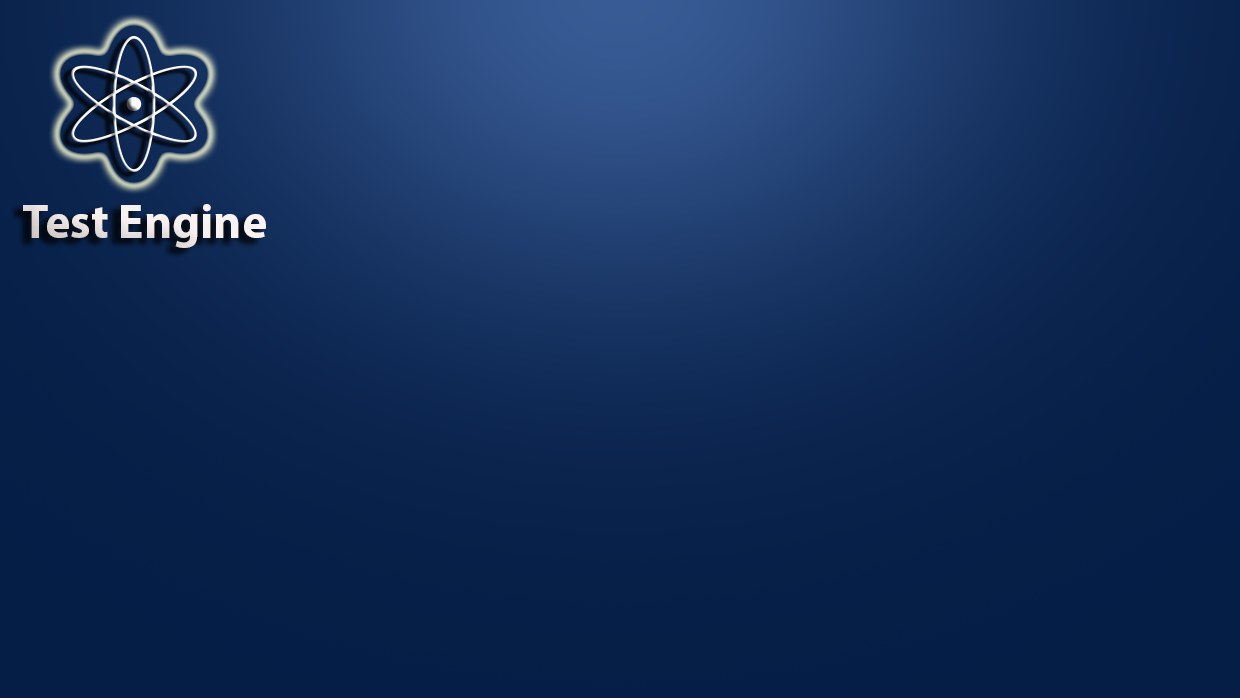
<style>
.page{position:relative;width:1240px;height:700px}
.page>*{position:absolute;margin:0}
.t1{font:48px "MyriadPro-Bold";color:#f7f0ef}
</style>
<div class="page">
<p class="t1" style="left:23px;top:204px;width:243px;height:44px">Test Engine</p>
</div>
